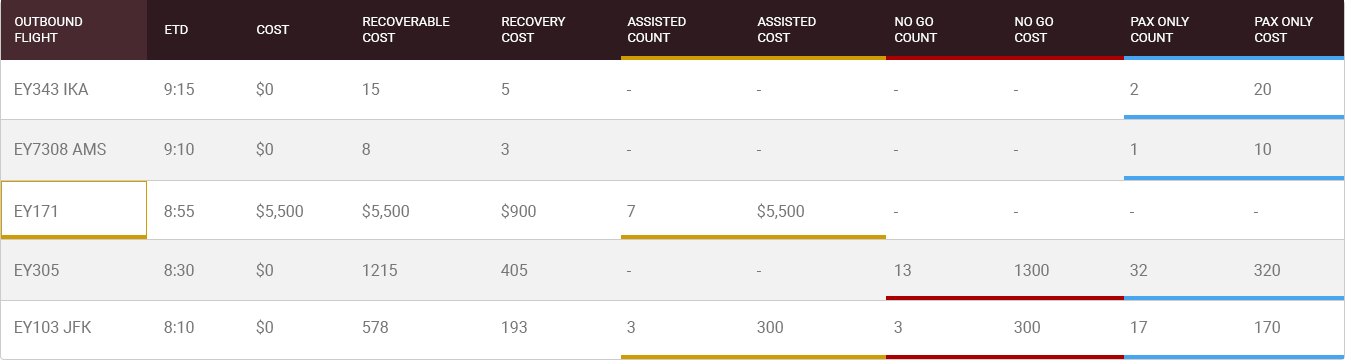
<style>
.page{position:relative;width:1345px;height:360px;background:#ffffff}
.page>*{position:absolute;margin:0}
.t1{font:13px "Roboto-Regular";color:#ffffff;text-transform:uppercase}
.t2{font:16px "Roboto-Regular";color:#767676}
</style>
<div class="page">
<p class="t1" style="left:15px;top:17px;width:68px;height:25px">Outbound<br>Flight</p>
<p class="t1" style="left:363px;top:17px;width:87px;height:25px">Recoverable<br>cost</p>
<p class="t1" style="left:502px;top:17px;width:64px;height:25px">ReCovery<br>Cost</p>
<p class="t1" style="left:627px;top:17px;width:59px;height:25px">Assisted<br>Count</p>
<p class="t1" style="left:757px;top:17px;width:59px;height:25px">Assisted<br>Cost</p>
<p class="t1" style="left:895px;top:17px;width:43px;height:25px">NO Go<br>Count</p>
<p class="t1" style="left:1015px;top:17px;width:39px;height:25px">NO Go<br>Cost</p>
<p class="t1" style="left:1131px;top:17px;width:59px;height:25px">Pax Only<br>Count</p>
<p class="t1" style="left:1255px;top:17px;width:59px;height:25px">Pax Only<br>Cost</p>
<p class="t1" style="left:165px;top:25px;width:23px;height:9px">ETD</p>
<p class="t1" style="left:257px;top:25px;width:33px;height:9px">Cost</p>
<p class="t2" style="left:15px;top:83px;width:74px;height:12px">EY343 IKA</p>
<p class="t2" style="left:164px;top:83px;width:30px;height:12px">9:15</p>
<p class="t2" style="left:256px;top:81px;width:17px;height:16px">$0</p>
<p class="t2" style="left:363px;top:83px;width:17px;height:12px">15</p>
<p class="t2" style="left:502px;top:83px;width:8px;height:12px">5</p>
<p class="t2" style="left:1130px;top:83px;width:9px;height:12px">2</p>
<p class="t2" style="left:1254px;top:83px;width:17px;height:12px">20</p>
<p class="t2" style="left:626px;top:90px;width:5px;height:1px">-</p>
<p class="t2" style="left:756px;top:90px;width:5px;height:1px">-</p>
<p class="t2" style="left:893px;top:90px;width:5px;height:1px">-</p>
<p class="t2" style="left:1013px;top:90px;width:5px;height:1px">-</p>
<p class="t2" style="left:15px;top:143px;width:91px;height:12px">EY7308 AMS</p>
<p class="t2" style="left:164px;top:143px;width:30px;height:12px">9:10</p>
<p class="t2" style="left:256px;top:141px;width:17px;height:16px">$0</p>
<p class="t2" style="left:362px;top:143px;width:8px;height:12px">8</p>
<p class="t2" style="left:501px;top:143px;width:8px;height:12px">3</p>
<p class="t2" style="left:626px;top:150px;width:5px;height:1px">-</p>
<p class="t2" style="left:756px;top:150px;width:5px;height:1px">-</p>
<p class="t2" style="left:893px;top:150px;width:5px;height:1px">-</p>
<p class="t2" style="left:1013px;top:150px;width:5px;height:1px">-</p>
<p class="t2" style="left:1131px;top:143px;width:5px;height:12px">1</p>
<p class="t2" style="left:1255px;top:143px;width:16px;height:12px">10</p>
<p class="t2" style="left:15px;top:205px;width:42px;height:12px">EY171</p>
<p class="t2" style="left:164px;top:205px;width:30px;height:12px">8:55</p>
<p class="t2" style="left:256px;top:203px;width:47px;height:16px">$5,500</p>
<p class="t2" style="left:362px;top:203px;width:47px;height:16px">$5,500</p>
<p class="t2" style="left:501px;top:203px;width:35px;height:16px">$900</p>
<p class="t2" style="left:627px;top:205px;width:9px;height:12px">7</p>
<p class="t2" style="left:757px;top:203px;width:47px;height:16px">$5,500</p>
<p class="t2" style="left:893px;top:212px;width:5px;height:1px">-</p>
<p class="t2" style="left:1013px;top:212px;width:5px;height:1px">-</p>
<p class="t2" style="left:1129px;top:212px;width:5px;height:1px">-</p>
<p class="t2" style="left:1253px;top:212px;width:5px;height:1px">-</p>
<p class="t2" style="left:15px;top:264px;width:44px;height:12px">EY305</p>
<p class="t2" style="left:164px;top:264px;width:30px;height:12px">8:30</p>
<p class="t2" style="left:256px;top:262px;width:17px;height:16px">$0</p>
<p class="t2" style="left:363px;top:264px;width:34px;height:12px">1215</p>
<p class="t2" style="left:501px;top:264px;width:27px;height:12px">405</p>
<p class="t2" style="left:895px;top:264px;width:16px;height:12px">13</p>
<p class="t2" style="left:1015px;top:264px;width:34px;height:12px">1300</p>
<p class="t2" style="left:1130px;top:264px;width:18px;height:12px">32</p>
<p class="t2" style="left:1254px;top:264px;width:26px;height:12px">320</p>
<p class="t2" style="left:626px;top:271px;width:5px;height:1px">-</p>
<p class="t2" style="left:756px;top:271px;width:5px;height:1px">-</p>
<p class="t2" style="left:15px;top:321px;width:77px;height:12px">EY103 JFK</p>
<p class="t2" style="left:164px;top:321px;width:30px;height:12px">8:10</p>
<p class="t2" style="left:256px;top:319px;width:17px;height:16px">$0</p>
<p class="t2" style="left:363px;top:321px;width:25px;height:12px">578</p>
<p class="t2" style="left:502px;top:321px;width:25px;height:12px">193</p>
<p class="t2" style="left:627px;top:321px;width:8px;height:12px">3</p>
<p class="t2" style="left:757px;top:321px;width:26px;height:12px">300</p>
<p class="t2" style="left:894px;top:321px;width:8px;height:12px">3</p>
<p class="t2" style="left:1014px;top:321px;width:26px;height:12px">300</p>
<p class="t2" style="left:1131px;top:321px;width:17px;height:12px">17</p>
<p class="t2" style="left:1255px;top:321px;width:25px;height:12px">170</p>
</div>
